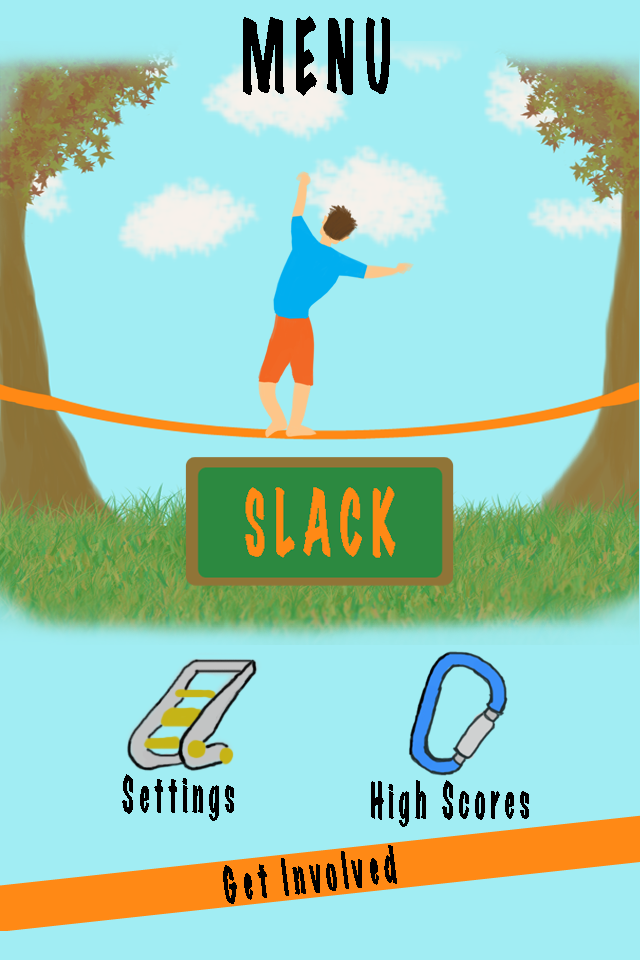
<style>
.page{position:relative;width:640px;height:960px;background:#a1edf3}
.page>*{position:absolute;margin:0}
.t1{font:90px "MarkerFelt-Wide";letter-spacing:0.2em;color:#000000;scale:0.52 1}
.t2{font:45px "MarkerFelt-Wide";letter-spacing:0.2em;color:#000000;scale:0.52 1}
</style>
<div class="page">
<p class="t1" style="left:243px;top:16px;width:147px;height:80px">MENU</p>
<p class="t2" style="left:122px;top:774px;width:112px;height:47px">Settings</p>
<p class="t2" style="left:371px;top:780px;width:158px;height:47px">High Scores</p>
</div>
